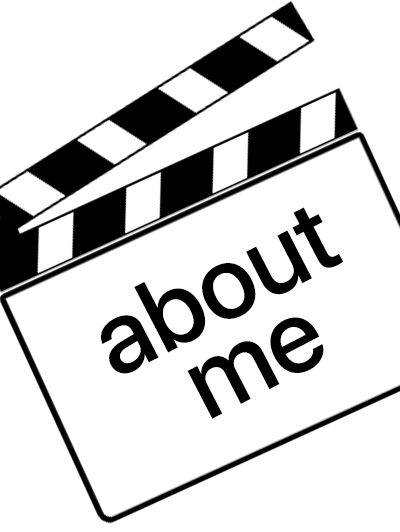
<style>
.page{position:relative;width:400px;height:532px;background:#ffffff}
.page>*{position:absolute;margin:0}
.t1{font:104.2px/79.2px "SFProDisplay-Medium";color:#000000}
</style>
<div class="page">
<p class="t1" style="left:101px;top:207px;width:242px;height:212px;rotate:-27deg">about<br>    me</p>
</div>
